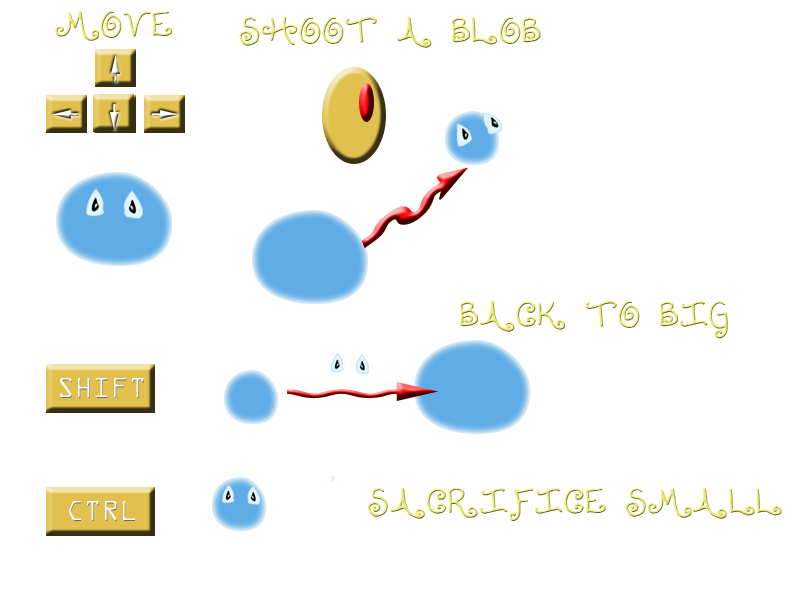
<style>
.page{position:relative;width:800px;height:600px;background:#ffffff}
.page>*{position:absolute;margin:0}
.t1{font:30px "Lollipop"}
.t2{font:25px "OCRAStd"}
</style>
<div class="page">
<p class="t1" style="left:55px;top:10px;width:118px;height:31px">MOVE</p>
<p class="t1" style="left:239px;top:16px;width:302px;height:32px">SHOOT A BLOB</p>
<p class="t1" style="left:460px;top:300px;width:268px;height:39px">BACK TO BIG</p>
<p class="t2" style="left:60px;top:378px;width:84px;height:20px">SHIFT</p>
<p class="t1" style="left:368px;top:487px;width:414px;height:34px">SACRIFICE SMALL</p>
<p class="t2" style="left:69px;top:501px;width:67px;height:20px">CTRL</p>
</div>
